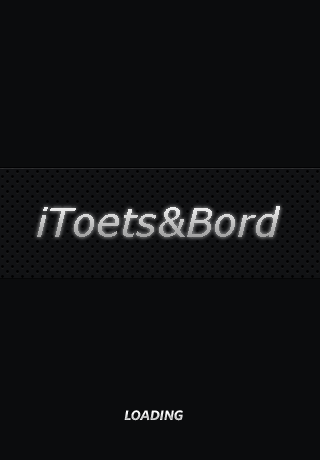
<style>
.page{position:relative;width:320px;height:460px;background:#0b0c0d}
.page>*{position:absolute;margin:0}
.t1{font:40px "Verdana-Italic"}
</style>
<div class="page">
<p class="t1" style="left:37px;top:206px;width:243px;height:31px">iToets&amp;Bord</p>
</div>
